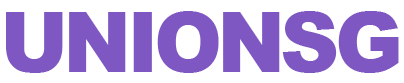
<style>
.page{position:relative;width:404px;height:83px;background:#ffffff}
.page>*{position:absolute;margin:0}
.t1{font:84.2px "Arial-Black";letter-spacing:-0.06em;color:#7e57c2}
</style>
<div class="page">
<p class="t1" style="left:6px;top:11px;width:393px;height:62px">UNIONSG</p>
</div>
